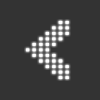
<style>
.page{position:relative;width:100px;height:100px;background:#333333}
.page>*{position:absolute;margin:0}
.t1{font:55.1px "TripleDotDigital-7";color:#ffffff;scale:1.19 1}
</style>
<div class="page">
<p class="t1" style="left:26px;top:21px;width:43px;height:58px">&lt;</p>
</div>
